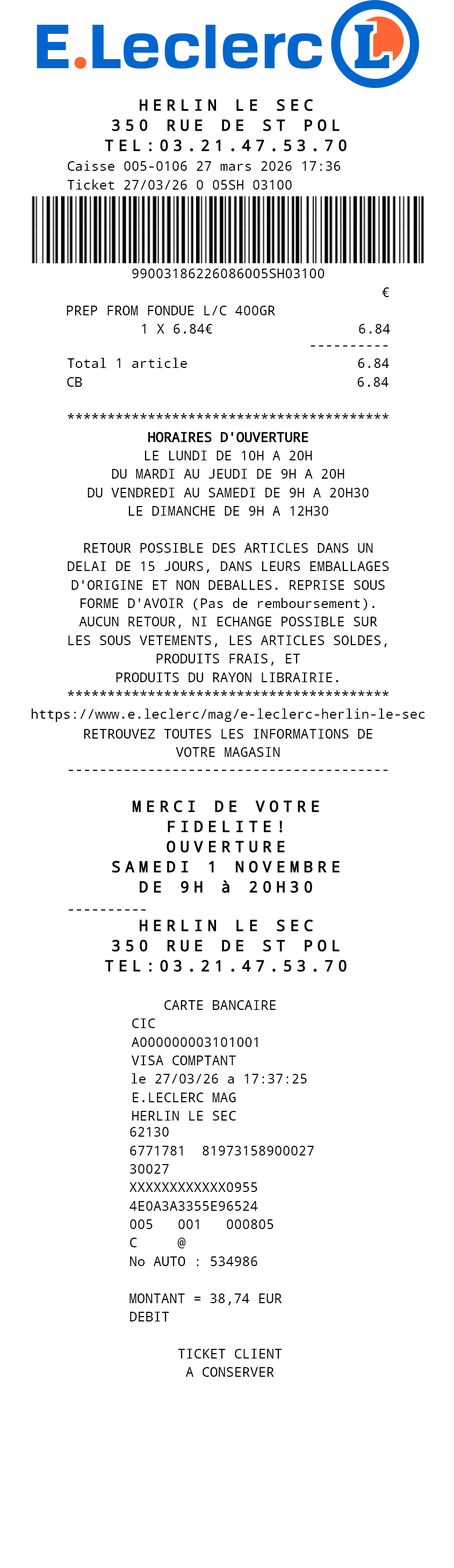
<style>
.page{position:relative;width:454px;height:1568px;background:#ffffff}
.page>*{position:absolute;margin:0}
.t1{font:13.4px "DroidSansMono";color:#000000}
</style>
<div class="page">
<p class="t1" style="left:68px;top:161px;width:273px;height:10px">Caisse 005-0106 27 mars 2026 17:36</p>
<p class="t1" style="left:67px;top:179px;width:225px;height:11px">Ticket 27/03/26 0 05SH 03100</p>
<p class="t1" style="left:132px;top:269px;width:192px;height:9px">99003186226086005SH03100</p>
<p class="t1" style="left:382px;top:287px;width:7px;height:10px">€</p>
<p class="t1" style="left:67px;top:306px;width:208px;height:9px">PREP FROM FONDUE L/C 400GR</p>
<p class="t1" style="left:142px;top:324px;width:248px;height:10px">1 X 6.84€                  6.84</p>
<p class="t1" style="left:310px;top:345px;width:78px;height:1px">----------</p>
<p class="t1" style="left:67px;top:358px;width:322px;height:10px">Total 1 article                     6.84</p>
<p class="t1" style="left:67px;top:377px;width:321px;height:10px">CB                                  6.84</p>
<p class="t1" style="left:68px;top:413px;width:321px;height:6px">****************************************</p>
<p class="t1" style="left:144px;top:451px;width:168px;height:9px">LE LUNDI DE 10H A 20H</p>
<p class="t1" style="left:112px;top:469px;width:232px;height:10px">DU MARDI AU JEUDI DE 9H A 20H</p>
<p class="t1" style="left:88px;top:488px;width:280px;height:9px">DU VENDREDI AU SAMEDI DE 9H A 20H30</p>
<p class="t1" style="left:128px;top:506px;width:200px;height:10px">LE DIMANCHE DE 9H A 12H30</p>
<p class="t1" style="left:84px;top:543px;width:289px;height:10px">RETOUR POSSIBLE DES ARTICLES DANS UN</p>
<p class="t1" style="left:68px;top:561px;width:321px;height:12px">DELAI DE 15 JOURS, DANS LEURS EMBALLAGES</p>
<p class="t1" style="left:71px;top:580px;width:314px;height:10px">D'ORIGINE ET NON DEBALLES. REPRISE SOUS</p>
<p class="t1" style="left:81px;top:598px;width:293px;height:12px">FORME D'AVOIR (Pas de remboursement).</p>
<p class="t1" style="left:79px;top:617px;width:298px;height:11px">AUCUN RETOUR, NI ECHANGE POSSIBLE SUR</p>
<p class="t1" style="left:68px;top:635px;width:319px;height:12px">LES SOUS VETEMENTS, LES ARTICLES SOLDES,</p>
<p class="t1" style="left:156px;top:654px;width:144px;height:12px">PRODUITS FRAIS, ET</p>
<p class="t1" style="left:116px;top:673px;width:222px;height:9px">PRODUITS DU RAYON LIBRAIRIE.</p>
<p class="t1" style="left:68px;top:690px;width:321px;height:6px">****************************************</p>
<p class="t1" style="left:32px;top:709px;width:393px;height:13px">https://www.e.leclerc/mag/e-leclerc-herlin-le-sec</p>
<p class="t1" style="left:84px;top:729px;width:288px;height:10px">RETROUVEZ TOUTES LES INFORMATIONS DE</p>
<p class="t1" style="left:176px;top:747px;width:104px;height:10px">VOTRE MAGASIN</p>
<p class="t1" style="left:69px;top:770px;width:319px;height:1px">----------------------------------------</p>
<p class="t1" style="left:69px;top:909px;width:77px;height:2px">----------</p>
<p class="t1" style="left:164px;top:1000px;width:112px;height:10px">CARTE BANCAIRE</p>
<p class="t1" style="left:132px;top:1018px;width:23px;height:10px">CIC</p>
<p class="t1" style="left:132px;top:1037px;width:126px;height:10px">A000000003101001</p>
<p class="t1" style="left:132px;top:1056px;width:104px;height:9px">VISA COMPTANT</p>
<p class="t1" style="left:131px;top:1073px;width:176px;height:10px">le 27/03/26 a 17:37:25</p>
<p class="t1" style="left:133px;top:1093px;width:103px;height:9px">E.LECLERC MAG</p>
<p class="t1" style="left:132px;top:1111px;width:104px;height:10px">HERLIN LE SEC</p>
<p class="t1" style="left:130px;top:1127px;width:39px;height:10px">62130</p>
<p class="t1" style="left:130px;top:1146px;width:184px;height:9px">6771781  81973158900027</p>
<p class="t1" style="left:130px;top:1164px;width:39px;height:10px">30027</p>
<p class="t1" style="left:129px;top:1182px;width:128px;height:10px">XXXXXXXXXXXX0955</p>
<p class="t1" style="left:129px;top:1201px;width:129px;height:10px">4E0A3A3355E96524</p>
<p class="t1" style="left:130px;top:1219px;width:143px;height:10px">005   001   000805</p>
<p class="t1" style="left:130px;top:1238px;width:56px;height:10px">C     @</p>
<p class="t1" style="left:130px;top:1256px;width:127px;height:10px">No AUTO : 534986</p>
<p class="t1" style="left:129px;top:1294px;width:153px;height:11px">MONTANT = 38,74 EUR</p>
<p class="t1" style="left:130px;top:1312px;width:39px;height:9px">DEBIT</p>
<p class="t1" style="left:178px;top:1349px;width:104px;height:10px">TICKET CLIENT</p>
<p class="t1" style="left:186px;top:1367px;width:88px;height:10px">A CONSERVER</p>
</div>
